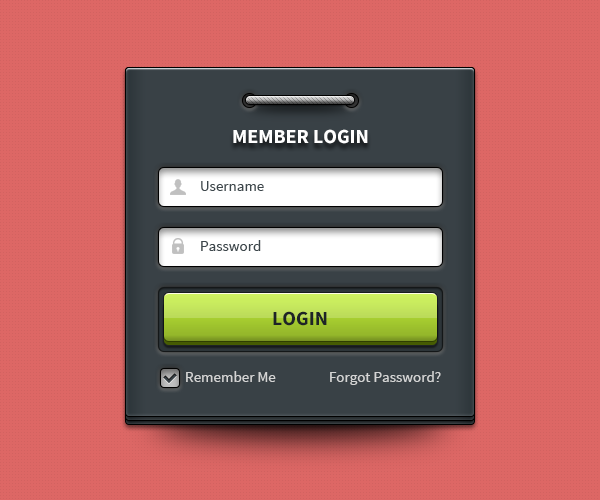
<style>
.page{position:relative;width:600px;height:500px;background:#dd6765}
.page>*{position:absolute;margin:0}
.t1{font:20px "SourceSansPro-Bold";color:#ffffff;text-transform:uppercase}
.t2{font:15px "SourceSansPro-Regular";color:#3d474c}
.t3{font:20px "SourceSansPro-Bold";color:#1e2427;text-transform:uppercase}
.t4{font:15px "SourceSansPro-Regular";color:#d4d4d4}
</style>
<div class="page">
<p class="t1" style="left:233px;top:129px;width:135px;height:15px">Member Login</p>
<p class="t2" style="left:201px;top:181px;width:63px;height:10px">Username</p>
<p class="t2" style="left:201px;top:240px;width:60px;height:11px">Password</p>
<p class="t3" style="left:273px;top:311px;width:54px;height:15px">login</p>
<p class="t4" style="left:186px;top:371px;width:90px;height:11px">Remember Me</p>
<p class="t4" style="left:330px;top:371px;width:111px;height:14px">Forgot Password?</p>
</div>
